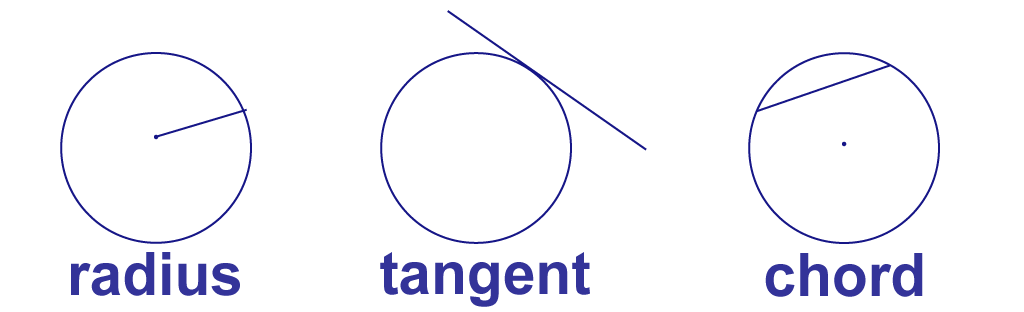
<style>
.page{position:relative;width:1024px;height:312px;background:#ffffff}
.page>*{position:absolute;margin:0}
.t1{font:60px "Arial-BoldMT";color:#333399}
</style>
<div class="page">
<p class="t1" style="left:71px;top:252px;width:169px;height:44px">radius</p>
<p class="t1" style="left:380px;top:252px;width:210px;height:55px">tangent</p>
<p class="t1" style="left:765px;top:253px;width:158px;height:44px">chord</p>
</div>
